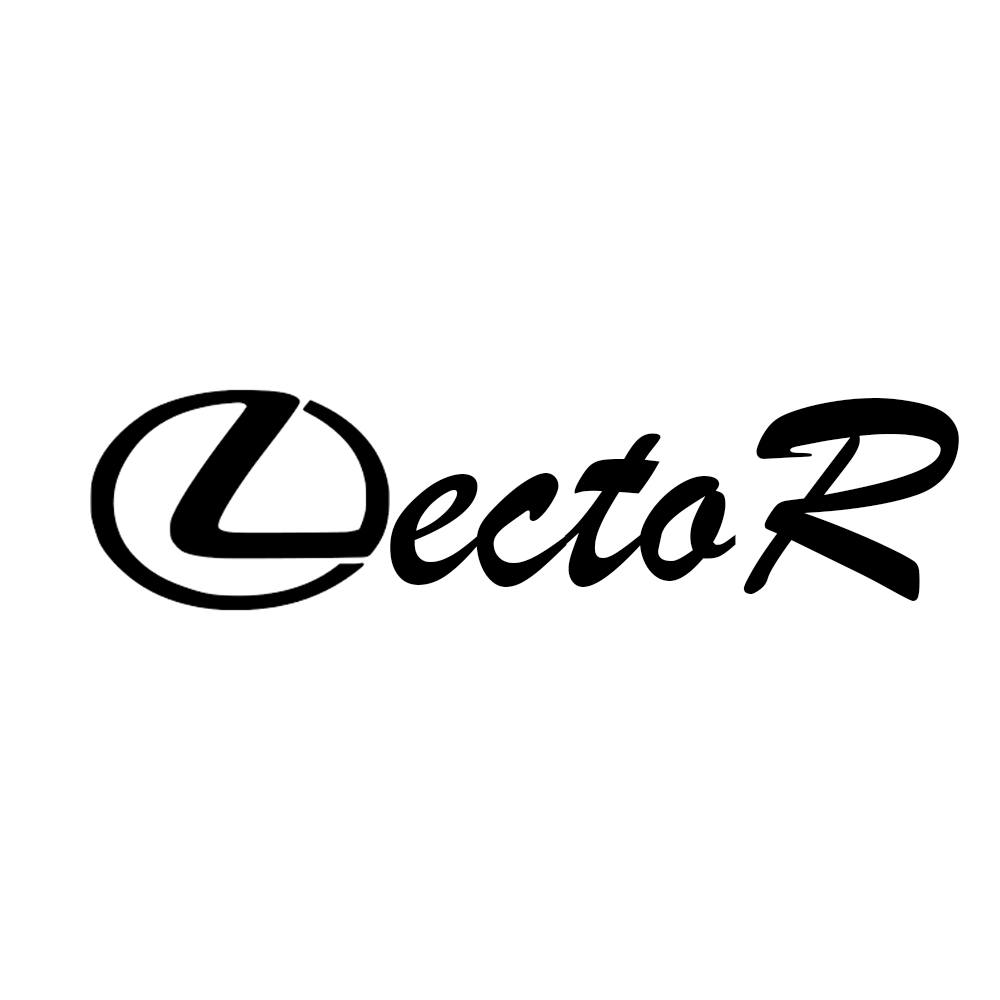
<style>
.page{position:relative;width:1000px;height:1000px;background:#ffffff}
.page>*{position:absolute;margin:0}
.t1{font:300px "BrushScriptMT";color:#000000}
</style>
<div class="page">
<p class="t1" style="left:390px;top:398px;width:569px;height:203px">ectoR</p>
</div>
